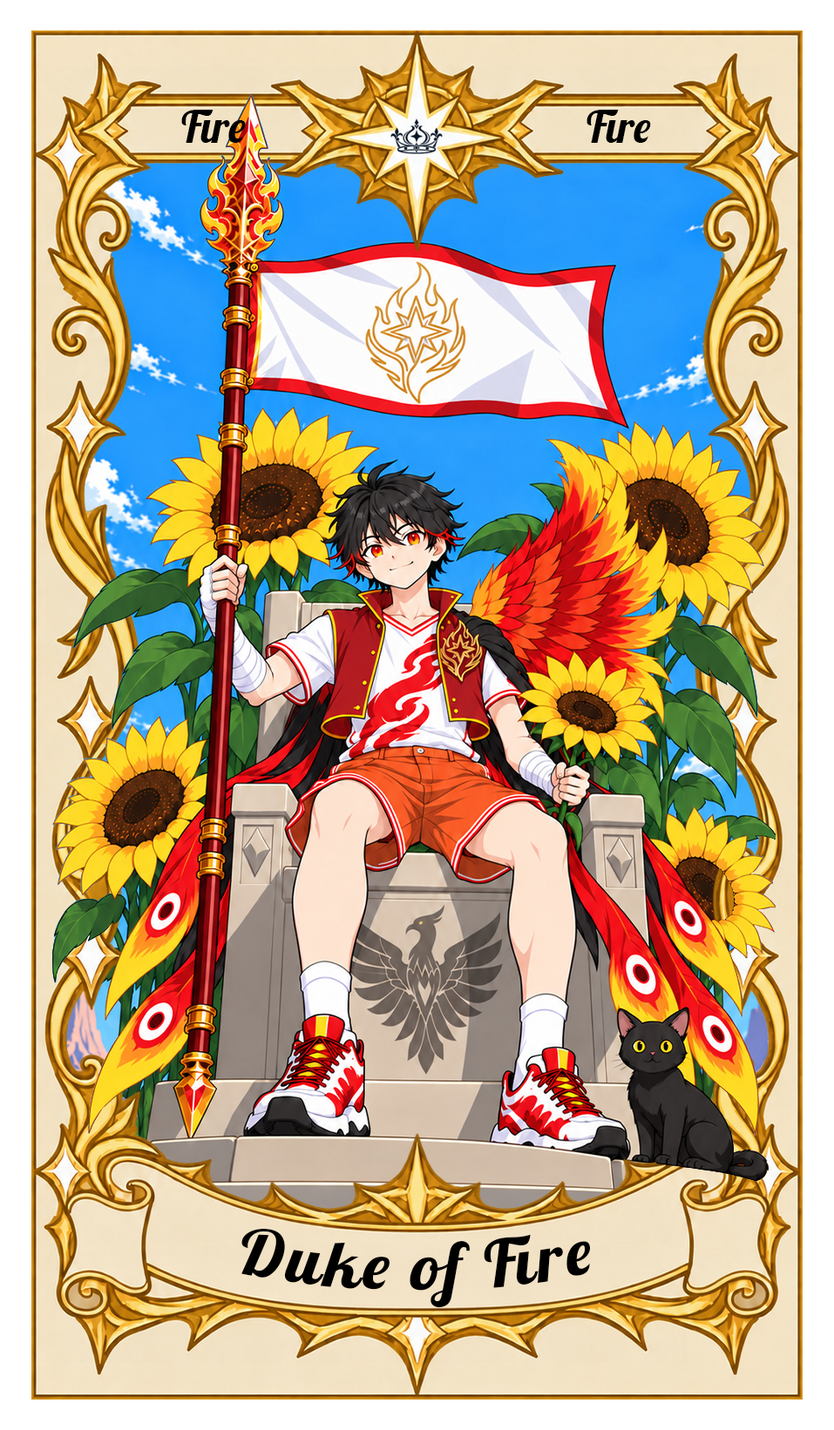
<style>
.page{position:relative;width:834px;height:1430px}
.page>*{position:absolute;margin:0}
.t1{font:43.6px "Lobster-Regular";color:#000000}
.t2{font:65.3px "Lobster-Regular";letter-spacing:0.05em;color:#000000}
</style>
<div class="page">
<p class="t1" style="left:181px;top:110px;width:65px;height:33px">Fire</p>
<p class="t1" style="left:586px;top:110px;width:65px;height:33px">Fire</p>
<p class="t2" style="left:241px;top:1228px;width:350px;height:80px">Duke of Fire</p>
</div>
